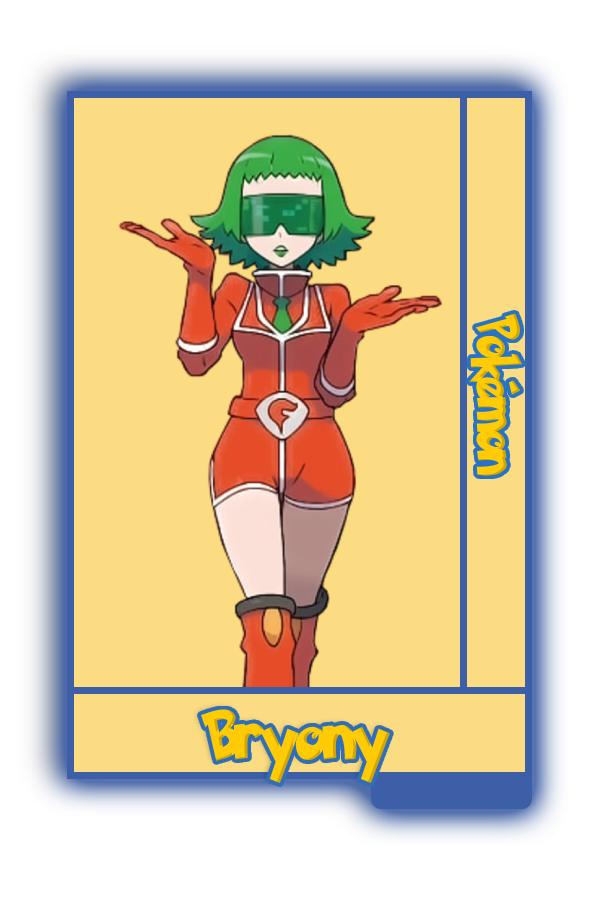
<style>
.page{position:relative;width:600px;height:900px;background:#fbdc83}
.page>*{position:absolute;margin:0}
.t1{font:48.8px "PokemonSolidNormal";color:#ffcb05;scale:0.8 1}
.t2{font:56.6px "PokemonSolidNormal";color:#ffcb05;scale:0.92 1}
</style>
<div class="page">
<p class="t1" style="left:469px;top:313px;width:54px;height:163px;rotate:90deg">Pokémon</p>
<p class="t2" style="left:201px;top:709px;width:189px;height:74px">Bryony</p>
</div>
